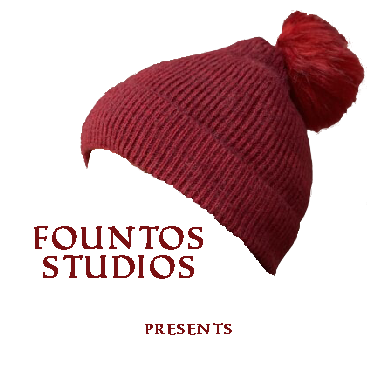
<style>
.page{position:relative;width:375px;height:373px;background:#ffffff}
.page>*{position:absolute;margin:0}
.t1{font:31px/28.5px "RomanSD";color:#7a1012;font-weight:bold}
.t2{font:14.7px "RomanSD";color:#7a1012;font-weight:bold}
</style>
<div class="page">
<p class="t1" style="left:34px;top:226px;width:169px;height:53px;text-align:center">FOUNTOS<br>STUDIOS</p>
<p class="t2" style="left:145px;top:323px;width:87px;height:12px">presents</p>
</div>
